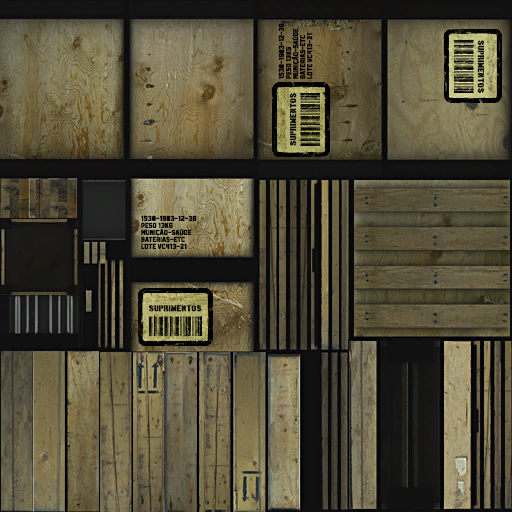
<style>
.page{position:relative;width:512px;height:512px}
.page>*{position:absolute;margin:0}
.t1{font:6.9px/7.1px "Infield-Block";color:#000000;font-weight:bold}
.t2{font:6.6px "BostonTraffic";letter-spacing:-0.02em;color:#0c0c0c;text-transform:uppercase;font-weight:bold;scale:1.3 1}
.t3{font:6.8px/7px "Infield-Block";color:#000000;font-weight:bold}
</style>
<div class="page">
<p class="t1" style="left:278px;top:23px;width:35px;height:56px;text-align:right;rotate:-90deg">1530-1903-12-38  <br>Peso 13kG  <br>MUNIÇÃO-SAÚDE  <br>BATERIAS-ETC  <br>LOTE vc413-21</p>
<p class="t2" style="left:477px;top:40px;width:8px;height:53px;rotate:90deg">suprimentos</p>
<p class="t2" style="left:289px;top:93px;width:8px;height:53px;rotate:-90deg">suprimentos</p>
<p class="t3" style="left:141px;top:215px;width:56px;height:34px;text-align:right">1530-1903-12-38  <br>Peso 13kG  <br>MUNIÇÃO-SAÚDE  <br>BATERIAS-ETC  <br>LOTE vc413-21</p>
<p class="t2" style="left:148px;top:305px;width:54px;height:7px">suprimentos</p>
</div>
